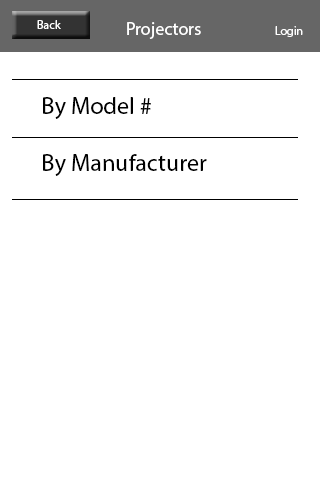
<style>
.page{position:relative;width:320px;height:480px;background:#ffffff}
.page>*{position:absolute;margin:0}
.t1{font:12px "MyriadPro-Regular";color:#ffffff}
.t2{font:18px "MyriadPro-Regular";color:#ffffff}
.t3{font:24px "MyriadPro-Regular";color:#000000}
</style>
<div class="page">
<p class="t1" style="left:37px;top:20px;width:24px;height:9px">Back</p>
<p class="t2" style="left:127px;top:22px;width:74px;height:17px">Projectors</p>
<p class="t1" style="left:275px;top:26px;width:28px;height:11px">Login</p>
<p class="t3" style="left:43px;top:97px;width:164px;height:79px">By Model #<br><br>By Manufacturer</p>
</div>
